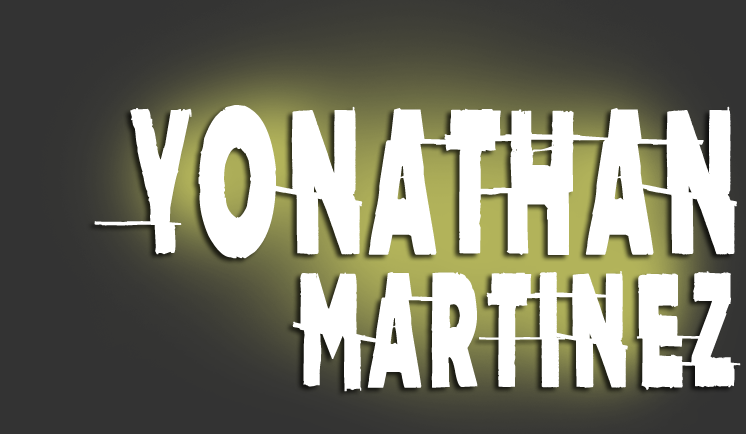
<style>
.page{position:relative;width:746px;height:434px;background:#ffffff}
.page>*{position:absolute;margin:0}
.t1{font:207.9px/159.5px "AmateurSlash";letter-spacing:0.055em;color:#ffffff;font-weight:bold;scale:0.51 1}
.t2{font:164.4px/133.5px "AmateurSlash";letter-spacing:0.055em;color:#ffffff;font-weight:bold;scale:0.51 1}
</style>
<div class="page">
<p class="t1" style="left:94px;top:105px;width:647px;height:287px">YONATHAN<br><span class="t2">      MARTINEZ</span></p>
</div>
